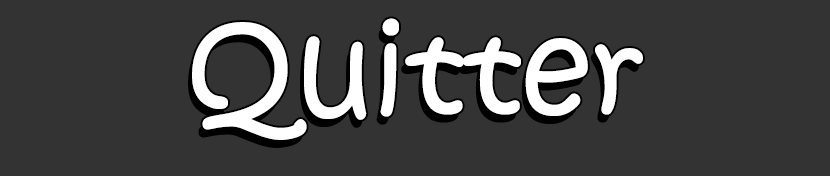
<style>
.page{position:relative;width:830px;height:176px;background:#333333}
.page>*{position:absolute;margin:0}
.t1{font:124.4px "KristenITC-Regular";color:#ffffff}
</style>
<div class="page">
<p class="t1" style="left:192px;top:18px;width:451px;height:122px">Quitter</p>
</div>
